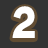
<style>
.page{position:relative;width:48px;height:48px;background:#333333}
.page>*{position:absolute;margin:0}
.t1{font:66px "Shorooq_N1";color:#ffffff}
</style>
<div class="page">
<p class="t1" style="left:12px;top:6px;width:23px;height:32px">2</p>
</div>
